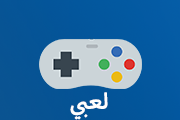
<style>
.page{position:relative;width:180px;height:120px}
.page>*{position:absolute;margin:0}
.t1{font:30px "MyriadArabic-Regular";color:#fefefe;font-weight:bold}
</style>
<div class="page">
<p class="t1" style="left:70px;top:92px;width:38px;height:28px">لعبي</p>
</div>
